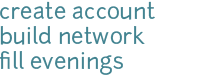
<style>
.page{position:relative;width:210px;height:75px;background:#ffffff}
.page>*{position:absolute;margin:0}
.t1{font:22px/25px "Junction";color:#438491}
.t2{font:22px/24px "Junction";color:#438491}
</style>
<div class="page">
<p class="t1" style="left:0px;top:1px;width:155px;height:74px"><span class="t2">create account<br></span>build network<br>fill evenings</p>
</div>
